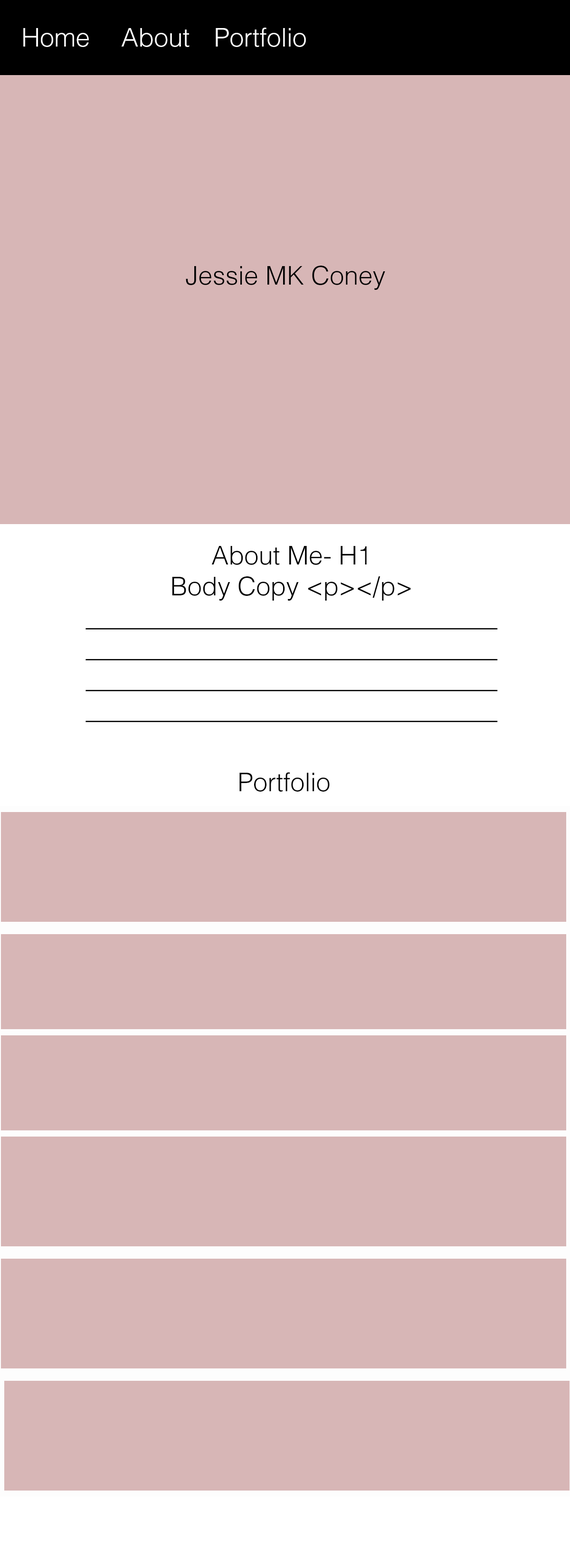
<style>
.page{position:relative;width:570px;height:1568px;background:#d7b6b6}
.page>*{position:absolute;margin:0}
.t1{font:25.7px "Helvetica-Light";color:#ffffff}
.t2{font:25.7px "Helvetica-Light";color:#000000}
</style>
<div class="page">
<p class="t1" style="left:23px;top:28px;width:283px;height:19px">Home   About    Portfolio</p>
<p class="t2" style="left:186px;top:266px;width:199px;height:24px">Jessie MK Coney</p>
<p class="t2" style="left:86px;top:546px;width:412px;height:176px;text-align:center">About Me- H1<br>Body Copy &lt;p&gt;&lt;/p&gt;<br>________________________________________________________________________________________________________________________________</p>
<p class="t2" style="left:239px;top:772px;width:91px;height:20px">Portfolio</p>
</div>
